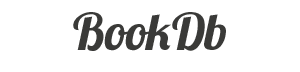
<style>
.page{position:relative;width:300px;height:72px;background:#ffffff}
.page>*{position:absolute;margin:0}
.t1{font:50.8px "Lobster1.3";letter-spacing:-0.005em;color:#3a3a38}
</style>
<div class="page">
<p class="t1" style="left:73px;top:12px;width:153px;height:39px">BookDb</p>
</div>
